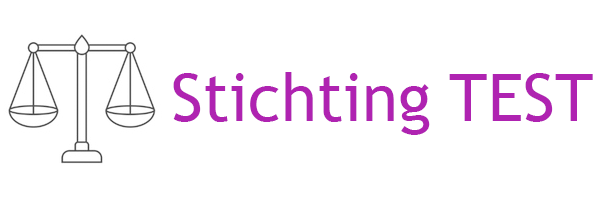
<style>
.page{position:relative;width:600px;height:200px;background:#ffffff}
.page>*{position:absolute;margin:0}
.t1{font:66px "TrebuchetMS";color:#af23b1}
</style>
<div class="page">
<p class="t1" style="left:173px;top:72px;width:420px;height:63px">Stichting TEST</p>
</div>
